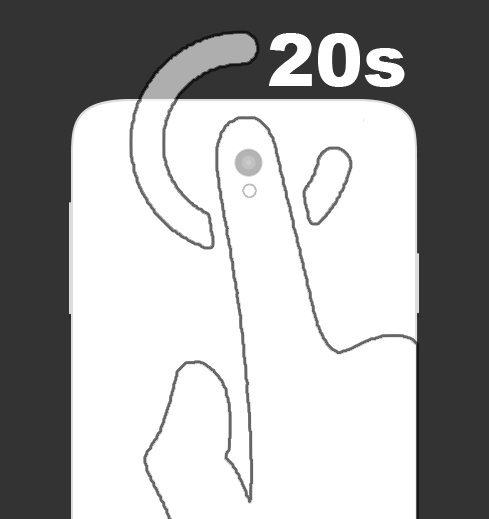
<style>
.page{position:relative;width:489px;height:519px;background:#ffffff}
.page>*{position:absolute;margin:0}
.t1{font:72px "Arial-Black";color:#ffffff}
</style>
<div class="page">
<p class="t1" style="left:268px;top:33px;width:137px;height:54px">20s</p>
</div>
